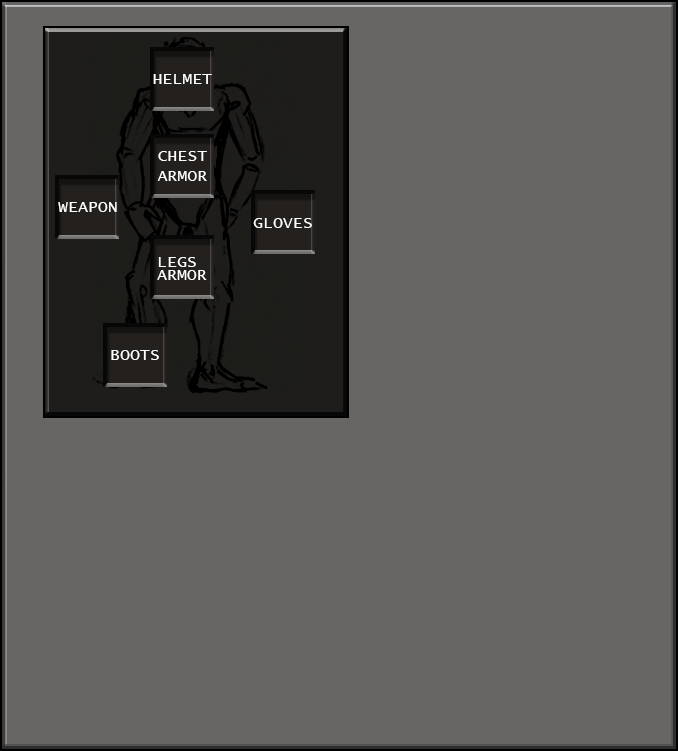
<style>
.page{position:relative;width:678px;height:751px;background:#686665}
.page>*{position:absolute;margin:0}
.t1{font:12px "LucidaConsole";color:#ffffff;text-transform:uppercase;scale:1.03 1}
.t2{font:12px/6.7px "LucidaConsole";color:#ffffff;text-transform:uppercase;scale:1.03 1}
.t3{font:16px "LucidaConsole";color:#ffffff;text-transform:uppercase;scale:1.03 1}
</style>
<div class="page">
<p class="t1" style="left:153px;top:74px;width:59px;height:10px">Helmet</p>
<p class="t2" style="left:157px;top:151px;width:50px;height:30px;text-align:right">Chest<br><br><br>Armor</p>
<p class="t3" style="left:58px;top:202px;width:59px;height:10px">Weapon</p>
<p class="t1" style="left:253px;top:218px;width:59px;height:10px">Gloves</p>
<p class="t2" style="left:157px;top:257px;width:50px;height:23px;text-align:right">Legs<br><br>Armor</p>
<p class="t1" style="left:111px;top:350px;width:48px;height:10px">Boots</p>
</div>
